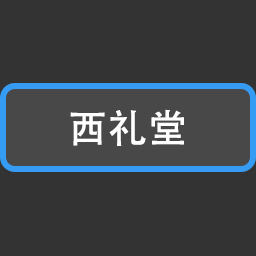
<style>
.page{position:relative;width:256px;height:256px;background:#333333}
.page>*{position:absolute;margin:0}
.t1{font:39px "AdobeHeitiStd-Regular";color:#ffffff;font-weight:bold}
</style>
<div class="page">
<p class="t1" style="left:70px;top:109px;width:114px;height:37px">西礼堂</p>
</div>
